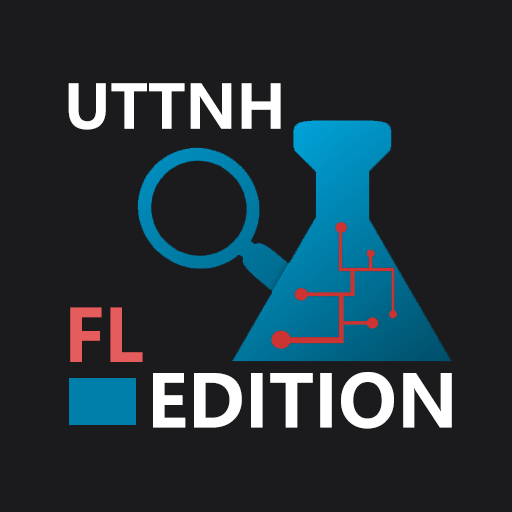
<style>
.page{position:relative;width:512px;height:512px;background:#1b1b1e}
.page>*{position:absolute;margin:0}
.t1{font:60px "MicrosoftYaHei-Bold";color:#ffffff}
.t2{font:72px "MicrosoftYaHei-Bold";color:#e45c5c}
.t3{font:72px "MicrosoftYaHei-Bold";color:#ffffff}
</style>
<div class="page">
<p class="t1" style="left:68px;top:83px;width:213px;height:47px">UTTNH</p>
<p class="t2" style="left:70px;top:307px;width:73px;height:55px">FL</p>
<p class="t3" style="left:153px;top:372px;width:299px;height:57px">EDITION</p>
</div>
